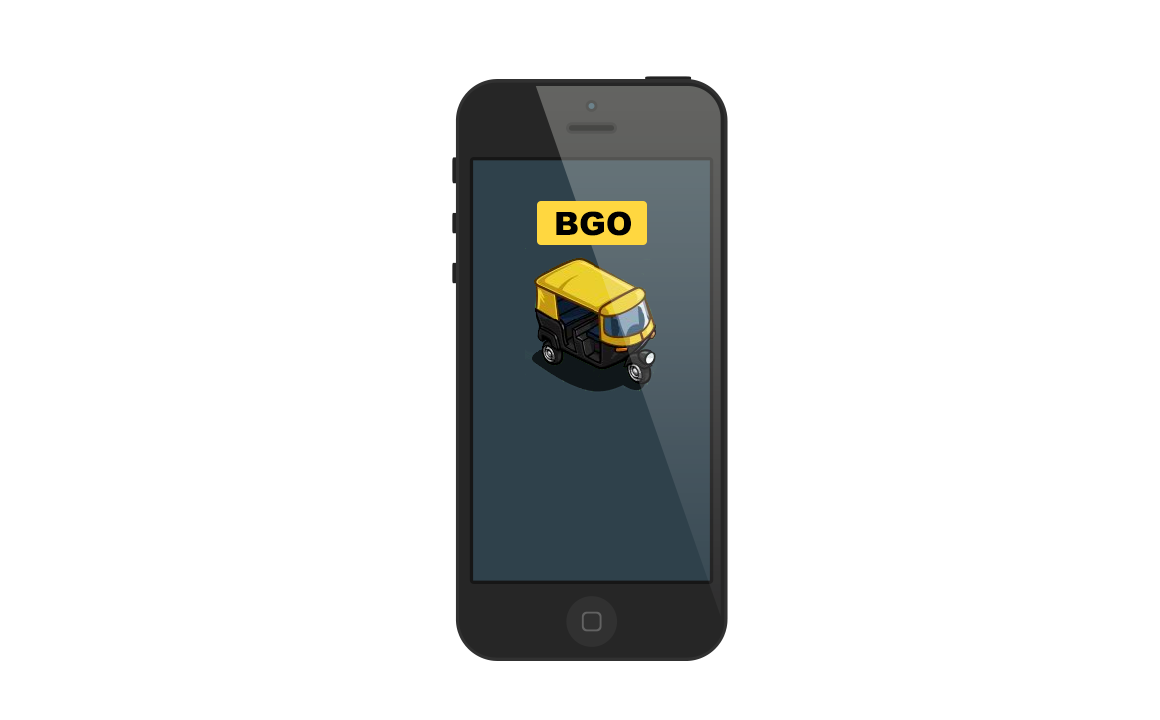
<style>
.page{position:relative;width:1160px;height:720px;background:#ffffff}
.page>*{position:absolute;margin:0}
.t1{font:32px "Arial-Black";color:#000000}
</style>
<div class="page">
<p class="t1" style="left:556px;top:211px;width:75px;height:25px">BGO</p>
</div>
